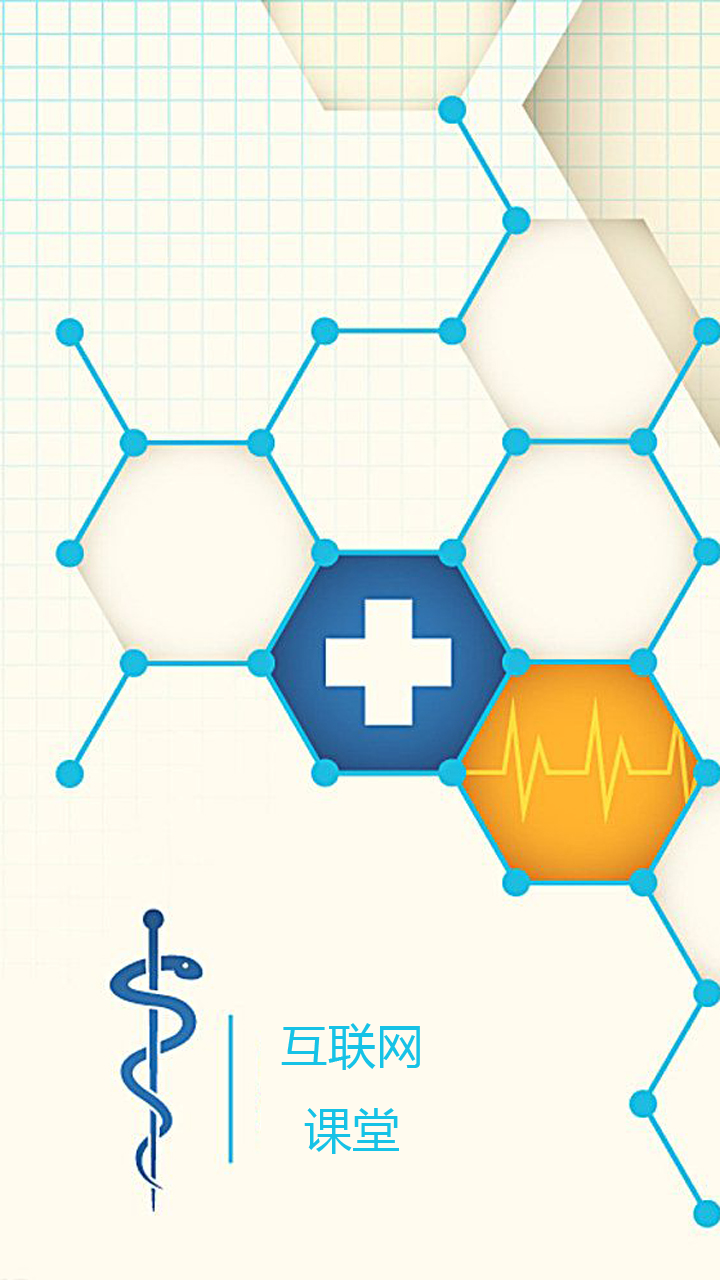
<style>
.page{position:relative;width:720px;height:1280px;background:#fffbef}
.page>*{position:absolute;margin:0}
.t1{font:48px "MicrosoftYaHei";color:#16c2e6}
</style>
<div class="page">
<p class="t1" style="left:281px;top:1023px;width:139px;height:131px;text-align:center">互联网<br>课堂</p>
</div>
